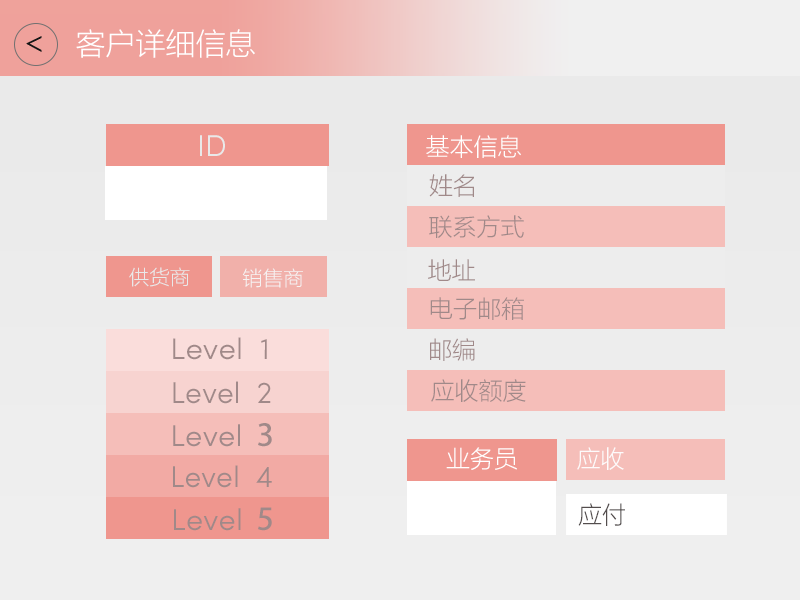
<style>
.page{position:relative;width:800px;height:600px}
.page>*{position:absolute;margin:0}
.t1{font:30px "MicrosoftYaHeiLight";color:#ffffff}
.t2{font:30px "SofiaProLight";color:#e9e9e9}
.t3{font:24px "MicrosoftYaHeiLight";color:#ffffff}
.t4{font:24px "MicrosoftYaHeiLight";color:#a08989}
.t5{font:20px "MicrosoftYaHeiLight";color:#e9e9e9}
.t6{font:29.9px "SofiaProLight";color:#a08989;scale:1.05 1}
.t7{font:30px "SofiaProLight";color:#a08989}
.t8{font:30.1px "SofiaProLight";color:#a08989;scale:1.03 1}
.t9{font:30.1px "AdobeHeitiStd-Regular";color:#a08989;scale:1.03 1}
.t10{font:24px "MicrosoftYaHeiLight";color:#fdfbfb}
.t11{font:30.1px "SofiaProLight";color:#a08989}
.t12{font:30.1px "AdobeHeitiStd-Regular";color:#a08989}
.t13{font:24px "MicrosoftYaHeiLight";color:#534d4d}
</style>
<div class="page">
<p class="t1" style="left:76px;top:29px;width:179px;height:29px">客户详细信息</p>
<p class="t2" style="left:200px;top:135px;width:25px;height:21px">ID</p>
<p class="t3" style="left:426px;top:135px;width:95px;height:23px">基本信息</p>
<p class="t4" style="left:429px;top:174px;width:45px;height:23px">姓名</p>
<p class="t4" style="left:429px;top:215px;width:95px;height:23px">联系方式</p>
<p class="t5" style="left:129px;top:267px;width:61px;height:20px">供货商</p>
<p class="t5" style="left:242px;top:268px;width:61px;height:20px">销售商</p>
<p class="t4" style="left:428px;top:259px;width:47px;height:22px">地址</p>
<p class="t4" style="left:430px;top:297px;width:94px;height:23px">电子邮箱</p>
<p class="t6" style="left:173px;top:337px;width:94px;height:23px">Level  1</p>
<p class="t4" style="left:430px;top:338px;width:45px;height:23px">邮编</p>
<p class="t7" style="left:173px;top:381px;width:98px;height:23px">Level  2</p>
<p class="t4" style="left:431px;top:379px;width:95px;height:23px">应收额度</p>
<p class="t8" style="left:173px;top:423px;width:99px;height:24px">Level<span class="t9">  3</span></p>
<p class="t3" style="left:446px;top:447px;width:71px;height:23px">业务员</p>
<p class="t10" style="left:577px;top:447px;width:47px;height:23px">应收</p>
<p class="t7" style="left:173px;top:465px;width:99px;height:23px">Level  4</p>
<p class="t11" style="left:174px;top:507px;width:98px;height:24px">Level<span class="t12">  5</span></p>
<p class="t13" style="left:578px;top:503px;width:47px;height:23px">应付</p>
</div>
